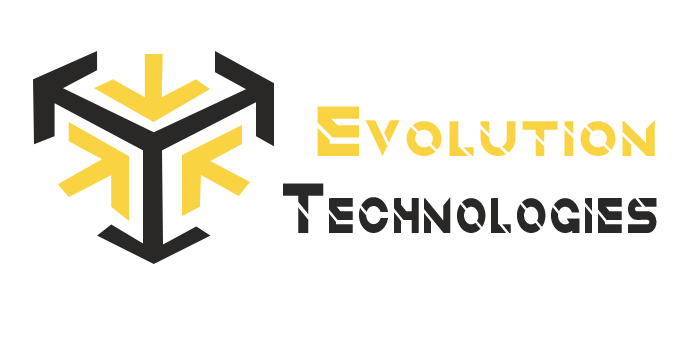
<style>
.page{position:relative;width:700px;height:340px;background:#ffffff}
.page>*{position:absolute;margin:0}
.t1{font:72px "QuantumRegular";color:#f9d342}
.t2{font:72px "QuantumRegular";color:#292826;scale:0.82 1}
</style>
<div class="page">
<p class="t1" style="left:317px;top:106px;width:338px;height:50px">Evolution</p>
<p class="t2" style="left:283px;top:183px;width:374px;height:50px">Technologies</p>
</div>
